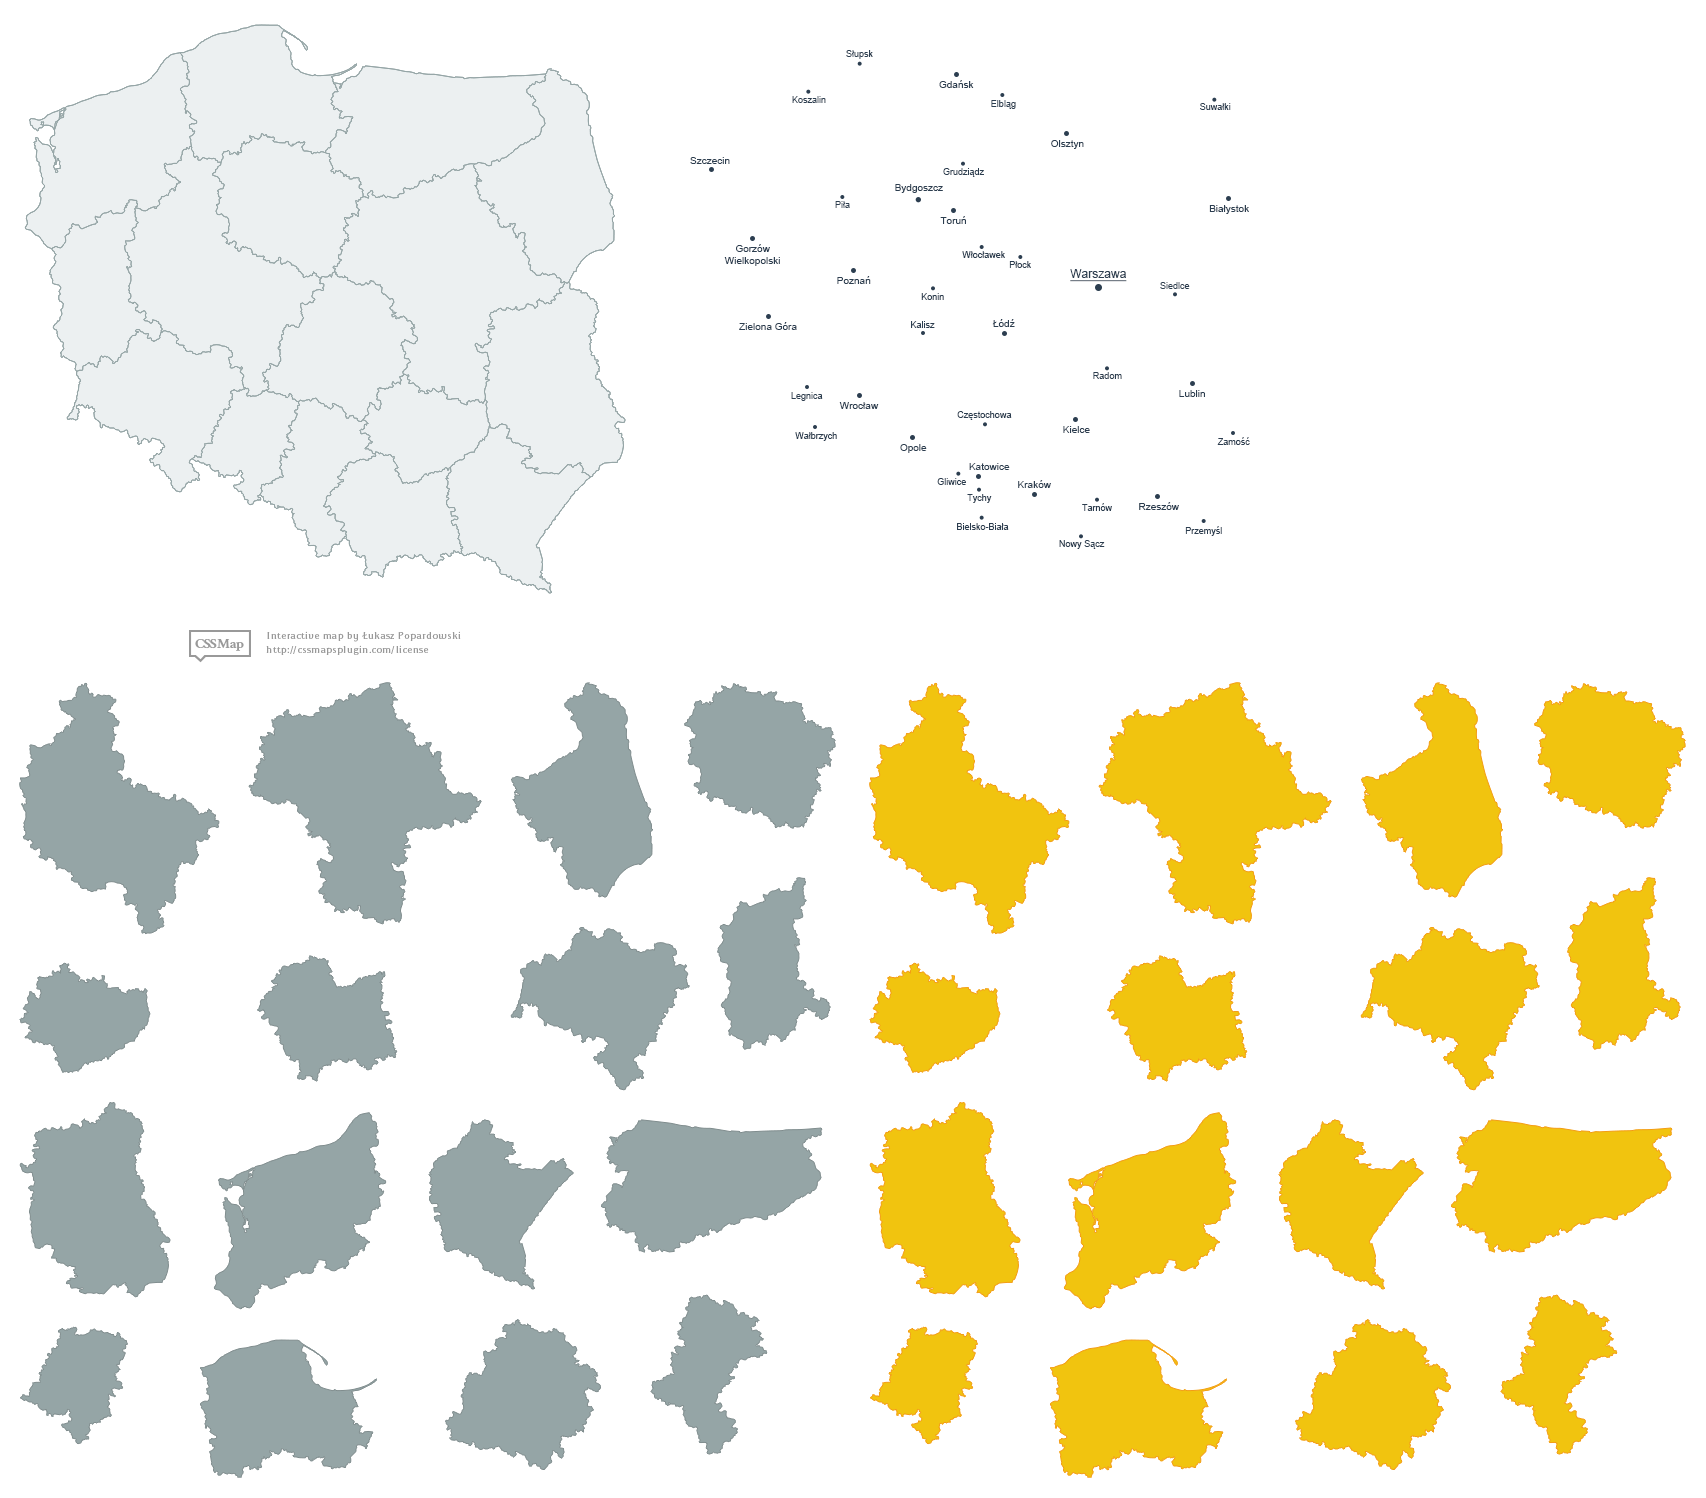
<style>
.page{position:relative;width:1706px;height:1498px;background:#ffffff}
.page>*{position:absolute;margin:0}
.t1{font:9px "ArialMT";color:#2c3e50}
.t2{font:10px "ArialMT";color:#2c3e50}
.t3{font:12px "ArialMT";color:#2c3e50;text-decoration:underline}
</style>
<div class="page">
<p class="t1" style="left:846px;top:50px;width:27px;height:9px">Słupsk</p>
<p class="t2" style="left:939px;top:80px;width:35px;height:8px">Gdańsk</p>
<p class="t1" style="left:792px;top:96px;width:34px;height:7px">Koszalin</p>
<p class="t1" style="left:991px;top:100px;width:25px;height:9px">Elbląg</p>
<p class="t1" style="left:1200px;top:103px;width:31px;height:7px">Suwałki</p>
<p class="t2" style="left:1051px;top:140px;width:33px;height:9px">Olsztyn</p>
<p class="t2" style="left:690px;top:157px;width:40px;height:7px">Szczecin</p>
<p class="t1" style="left:943px;top:168px;width:41px;height:9px">Grudziądz</p>
<p class="t2" style="left:895px;top:184px;width:48px;height:9px">Bydgoszcz</p>
<p class="t1" style="left:835px;top:201px;width:15px;height:7px">Piła</p>
<p class="t2" style="left:1209px;top:205px;width:40px;height:9px">Białystok</p>
<p class="t2" style="left:940px;top:216px;width:26px;height:8px">Toruń</p>
<p class="t2" style="left:724px;top:244px;width:56px;height:22px;text-align:center">Gorzów<br>Wielkopolski</p>
<p class="t1" style="left:962px;top:251px;width:43px;height:7px">Włocławek</p>
<p class="t1" style="left:1009px;top:261px;width:22px;height:7px">Płock</p>
<p class="t3" style="left:1070px;top:269px;width:57px;height:13px">Warszawa</p>
<p class="t2" style="left:837px;top:276px;width:34px;height:8px">Poznań</p>
<p class="t1" style="left:1160px;top:282px;width:30px;height:7px">Siedlce</p>
<p class="t1" style="left:921px;top:293px;width:23px;height:7px">Konin</p>
<p class="t2" style="left:739px;top:322px;width:58px;height:8px">Zielona Góra</p>
<p class="t1" style="left:911px;top:321px;width:24px;height:7px">Kalisz</p>
<p class="t2" style="left:992px;top:319px;width:23px;height:8px">Łódź</p>
<p class="t1" style="left:1093px;top:372px;width:29px;height:7px">Radom</p>
<p class="t2" style="left:1179px;top:390px;width:26px;height:7px">Lublin</p>
<p class="t1" style="left:791px;top:392px;width:32px;height:9px">Legnica</p>
<p class="t2" style="left:839px;top:402px;width:40px;height:7px">Wrocław</p>
<p class="t1" style="left:957px;top:411px;width:55px;height:9px">Częstochowa</p>
<p class="t2" style="left:1063px;top:426px;width:27px;height:7px">Kielce</p>
<p class="t1" style="left:795px;top:432px;width:42px;height:9px">Wałbrzych</p>
<p class="t1" style="left:1217px;top:437px;width:33px;height:8px">Zamość</p>
<p class="t2" style="left:900px;top:444px;width:27px;height:9px">Opole</p>
<p class="t2" style="left:969px;top:463px;width:41px;height:7px">Katowice</p>
<p class="t1" style="left:937px;top:478px;width:29px;height:7px">Gliwice</p>
<p class="t2" style="left:1018px;top:480px;width:33px;height:8px">Kraków</p>
<p class="t1" style="left:967px;top:494px;width:25px;height:9px">Tychy</p>
<p class="t1" style="left:1082px;top:503px;width:30px;height:8px">Tarnów</p>
<p class="t2" style="left:1139px;top:502px;width:40px;height:8px">Rzeszów</p>
<p class="t1" style="left:957px;top:523px;width:52px;height:7px">Bielsko-Biała</p>
<p class="t1" style="left:1185px;top:526px;width:37px;height:10px">Przemyśl</p>
<p class="t1" style="left:1059px;top:540px;width:46px;height:9px">Nowy Sącz</p>
</div>
